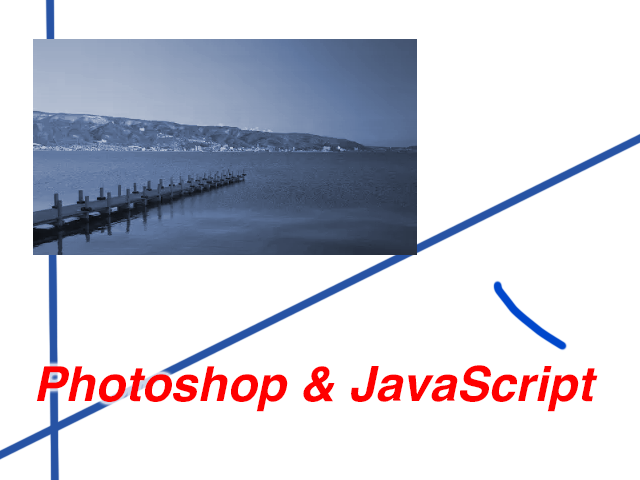
<style>
.page{position:relative;width:640px;height:480px;background:#ffffff}
.page>*{position:absolute;margin:0}
.t1{font:48.5px "Helvetica-BoldOblique";color:#ff0000}
</style>
<div class="page">
<p class="t1" style="left:36px;top:365px;width:562px;height:47px">Photoshop &amp; JavaScript</p>
</div>
